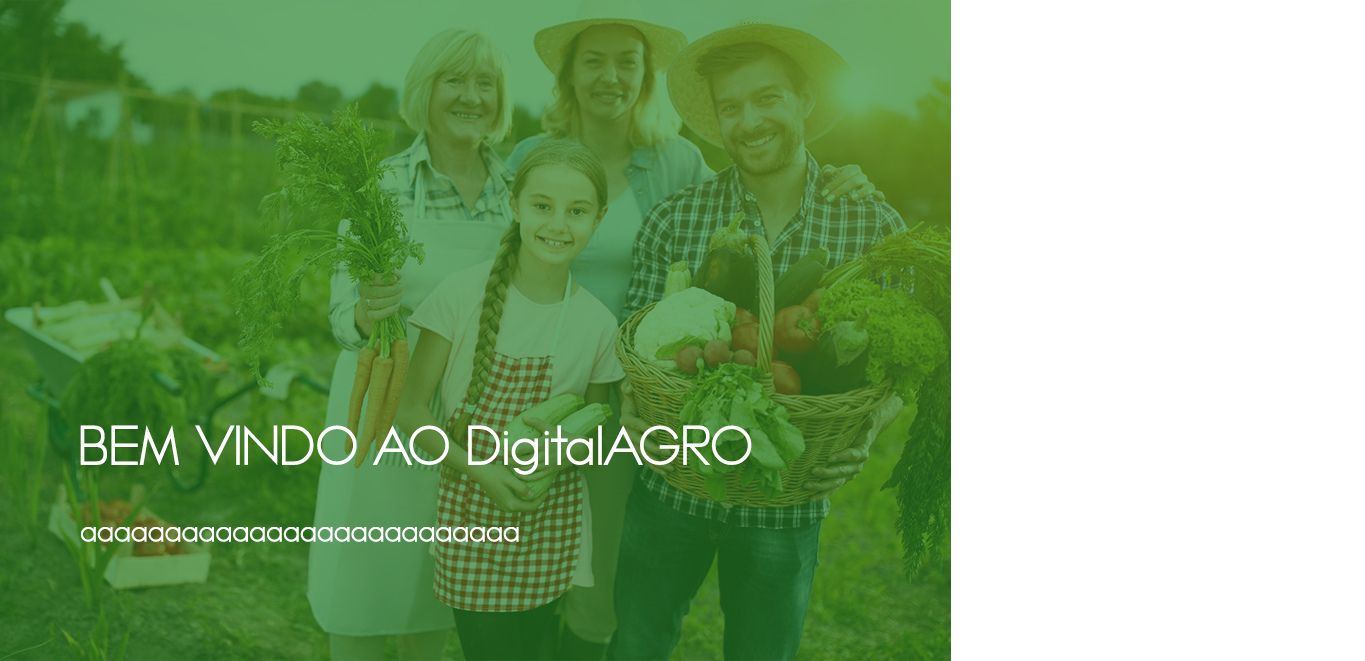
<style>
.page{position:relative;width:1365px;height:661px;background:#ffffff}
.page>*{position:absolute;margin:0}
.t1{font:66.7px "MadeleinaSans";color:#ffffff}
.t2{font:37.3px "MadeleinaSans";color:#ffffff}
</style>
<div class="page">
<p class="t1" style="left:80px;top:425px;width:672px;height:50px">BEM VINDO AO DigitalAGRO</p>
<p class="t2" style="left:81px;top:527px;width:438px;height:15px">aaaaaaaaaaaaaaaaaaaaaaaaaa</p>
</div>
